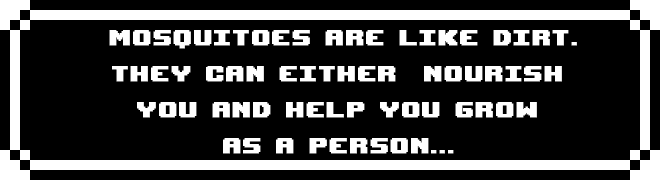
<style>
.page{position:relative;width:660px;height:180px;background:#000000}
.page>*{position:absolute;margin:0}
.t1{font:30px "UpheavalTT-BRK-";letter-spacing:0.05em;color:#ffffff;font-weight:bold}
</style>
<div class="page">
<p class="t1" style="left:109px;top:30px;width:468px;height:124px;text-align:center">mosquitoes are like dirt. <br>They can either  nourish <br>you and help you grow <br>as a person...</p>
</div>
